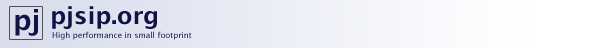
<style>
.page{position:relative;width:600px;height:48px}
.page>*{position:absolute;margin:0}
.t1{font:24px "LucidaSans-Demi";color:#121344}
.t2{font:28px "LucidaSans-Demi";color:#121344}
.t3{font:8px "LucidaSans"}
</style>
<div class="page">
<p class="t1" style="left:52px;top:6px;width:105px;height:23px">pjsip.org</p>
<p class="t2" style="left:15px;top:9px;width:23px;height:27px">pj</p>
<p class="t3" style="left:52px;top:31px;width:140px;height:9px">High performance in small footprint</p>
</div>
